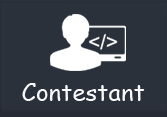
<style>
.page{position:relative;width:167px;height:117px;background:#2a313b}
.page>*{position:absolute;margin:0}
.t1{font:24px "ComicSansMS";color:#fafafb}
</style>
<div class="page">
<p class="t1" style="left:22px;top:83px;width:123px;height:18px">Contestantt</p>
</div>
